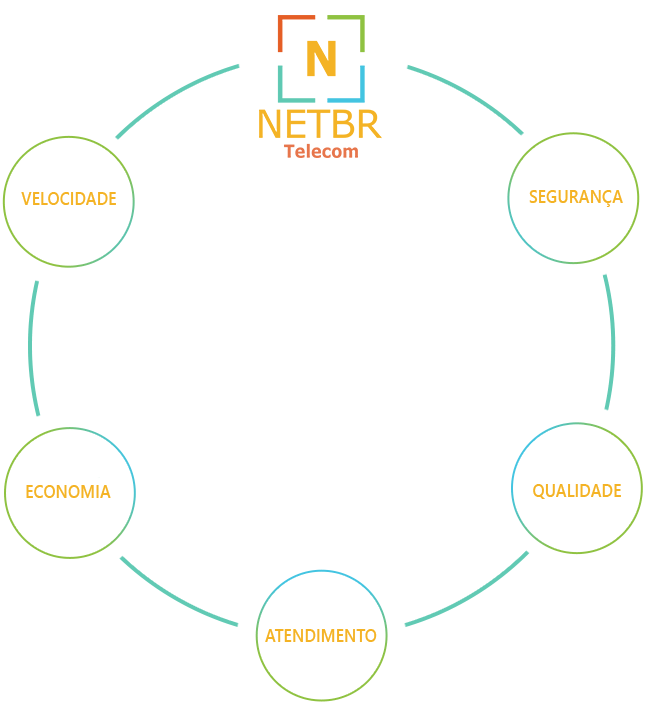
<style>
.page{position:relative;width:645px;height:704px;background:#ffffff}
.page>*{position:absolute;margin:0}
.t1{font:18px "SegoeUI-Semibold";color:#f4b325;scale:0.9 1}
</style>
<div class="page">
<p class="t1" style="left:21px;top:192px;width:95px;height:13px">VELOCIDADE</p>
<p class="t1" style="left:529px;top:190px;width:94px;height:17px">SEGURANÇA</p>
<p class="t1" style="left:26px;top:485px;width:85px;height:13px">ECONOMIA</p>
<p class="t1" style="left:533px;top:484px;width:88px;height:15px">QUALIDADE</p>
<p class="t1" style="left:265px;top:629px;width:112px;height:13px">ATENDIMENTO</p>
</div>
